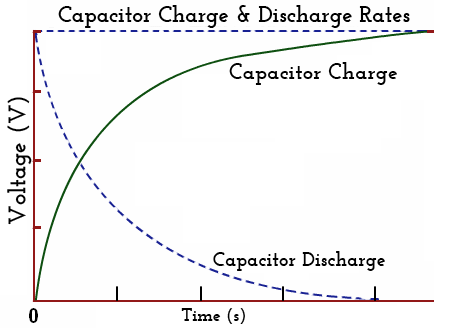
<style>
.page{position:relative;width:467px;height:328px;background:#fefefe}
.page>*{position:absolute;margin:0}
.t1{font:22.7px "JosefinSlab-Bold";color:#000000}
.t2{font:22.5px "JosefinSlab-Bold";color:#000000}
.t3{font:24.1px "JosefinSlab-Bold";color:#000000}
.t4{font:20.2px "JosefinSlab-Bold";color:#000000}
.t5{font:17.6px "JosefinSlab-Bold";color:#000000}
</style>
<div class="page">
<p class="t1" style="left:58px;top:5px;width:352px;height:23px">Capacitor Charge &amp; Discharge Rates</p>
<p class="t2" style="left:229px;top:62px;width:168px;height:23px">Capacitor Charge</p>
<p class="t3" style="left:7px;top:97px;width:25px;height:128px;rotate:-90deg">Voltage (V)</p>
<p class="t4" style="left:213px;top:251px;width:172px;height:20px">Capacitor Discharge</p>
<p class="t5" style="left:181px;top:308px;width:64px;height:16px">Time (s)</p>
</div>
